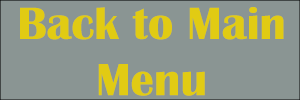
<style>
.page{position:relative;width:300px;height:100px;background:#8a9593}
.page>*{position:absolute;margin:0}
.t1{font:46.8px "BritannicBold";color:#e1cb13}
</style>
<div class="page">
<p class="t1" style="left:20px;top:7px;width:264px;height:89px;text-align:center">Back to Main Menu</p>
</div>
